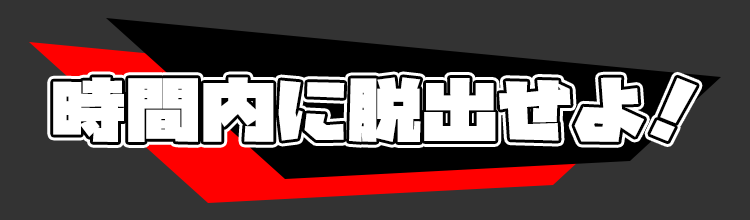
<style>
.page{position:relative;width:750px;height:220px;background:#333333}
.page>*{position:absolute;margin:0}
.t1{font:65px "GN-KMBFont-UB-OldstyleKana";letter-spacing:0.05em;color:#ffffff;scale:1.1 1}
</style>
<div class="page">
<p class="t1" style="left:53px;top:77px;width:644px;height:65px">時間内に脱出せよ！</p>
</div>
